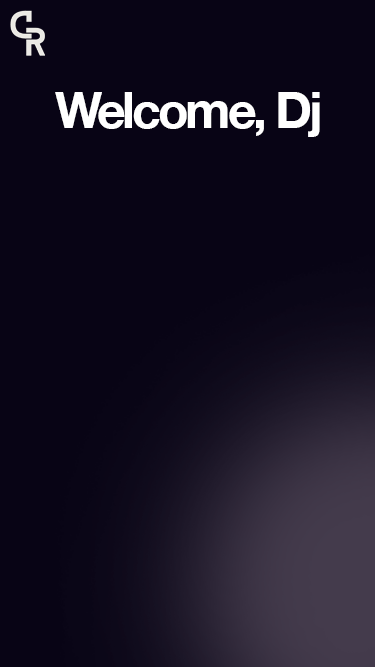
<style>
.page{position:relative;width:375px;height:667px;background:#080415}
.page>*{position:absolute;margin:0}
.t1{font:50px "HelveticaNeue-Bold";letter-spacing:-0.06em;color:#ffffff}
</style>
<div class="page">
<p class="t1" style="left:55px;top:92px;width:265px;height:45px">Welcome, Dj</p>
</div>
